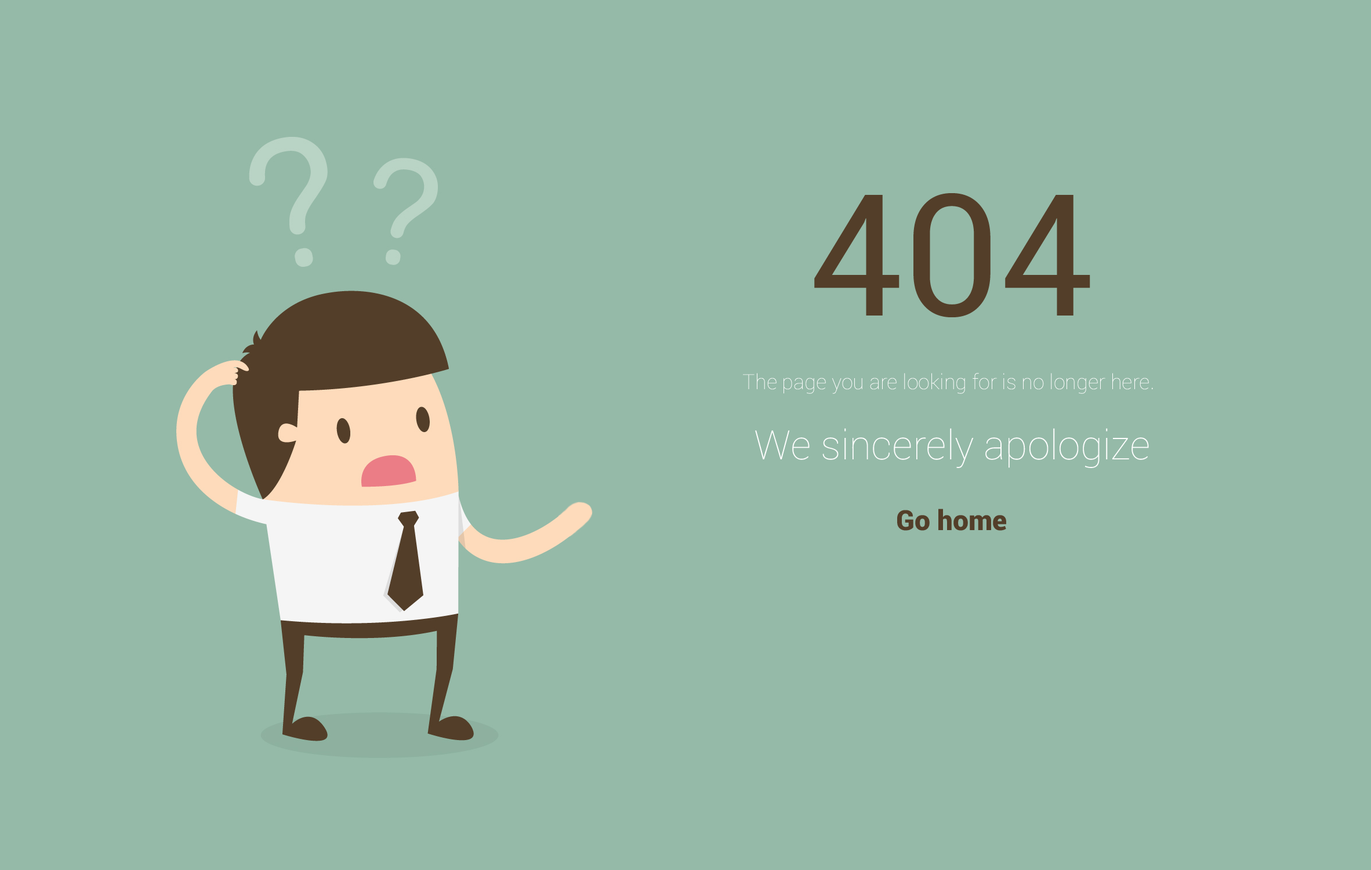
<style>
.page{position:relative;width:1371px;height:870px;background:#95baa8}
.page>*{position:absolute;margin:0}
.t1{font:169.6px "Roboto-Regular";color:#533e29}
.t2{font:20.9px "Roboto-Thin";color:#fefefe}
.t3{font:40.6px "Roboto-Thin";color:#ffffff}
.t4{font:27.8px "Roboto-Black";color:#533e29}
</style>
<div class="page">
<p class="t1" style="left:814px;top:193px;width:276px;height:124px">404</p>
<p class="t2" style="left:743px;top:373px;width:410px;height:21px">The page you are looking for is no longer here.</p>
<p class="t3" style="left:755px;top:428px;width:394px;height:40px">We sincerely apologize</p>
<p class="t4" style="left:897px;top:509px;width:109px;height:22px">Go home</p>
</div>
